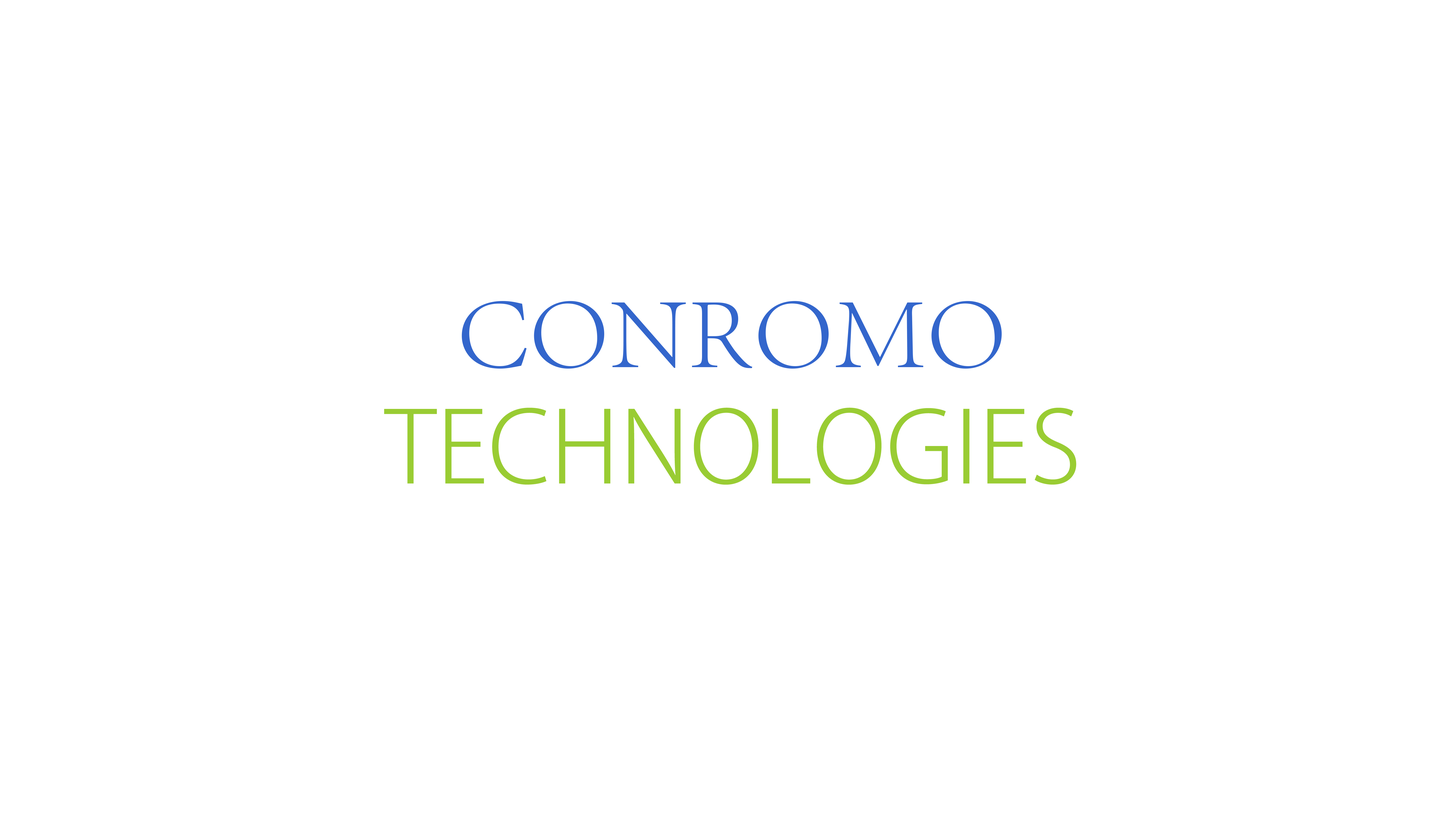
<style>
.page{position:relative;width:1452px;height:821px;background:#ffffff}
.page>*{position:absolute;margin:0}
.t1{font:103.2px "AdobeSongStd-Light";letter-spacing:0.005em;color:#3366cc}
.t2{font:98.3px "KozGoPr6N-Light";letter-spacing:0.005em;color:#99cc33}
</style>
<div class="page">
<p class="t1" style="left:462px;top:301px;width:540px;height:68px">CONROMO</p>
<p class="t2" style="left:384px;top:408px;width:692px;height:77px">TECHNOLOGIES</p>
</div>
